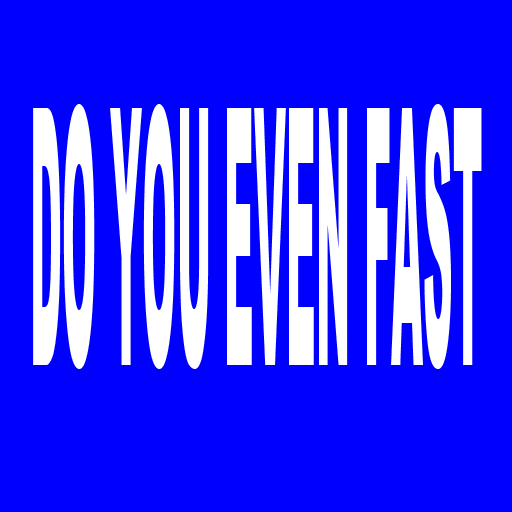
<style>
.page{position:relative;width:512px;height:512px;background:#0000ff}
.page>*{position:absolute;margin:0}
.t1{font:358.9px "Arial-Black";color:#ffffff;scale:0.11 1}
</style>
<div class="page">
<p class="t1" style="left:33px;top:104px;width:449px;height:265px">DO YOU EVEN FAST</p>
</div>
